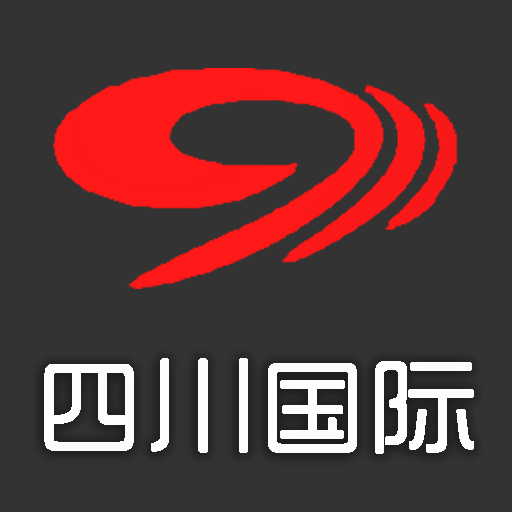
<style>
.page{position:relative;width:512px;height:512px;background:#333333}
.page>*{position:absolute;margin:0}
.t1{font:106.7px "SJshishang-Regular";letter-spacing:0.02em;color:#fcfdfd;font-weight:bold}
</style>
<div class="page">
<p class="t1" style="left:44px;top:358px;width:430px;height:96px">四川国际</p>
</div>
